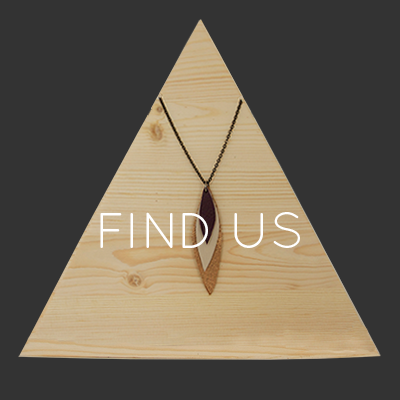
<style>
.page{position:relative;width:400px;height:400px;background:#333333}
.page>*{position:absolute;margin:0}
.t1{font:50.5px "QuicksandBook-Regular";color:#ffffff}
</style>
<div class="page">
<p class="t1" style="left:100px;top:212px;width:200px;height:36px">FIND US</p>
</div>
